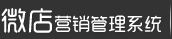
<style>
.page{position:relative;width:172px;height:39px;background:#333333}
.page>*{position:absolute;margin:0}
.t1{font:18px "RTWSYueRoudGoDemo-Regular";color:#ffffff}
.t2{font:27px "RTWSYueRoudGoDemo-Regular";color:#ffffff}
</style>
<div class="page">
<p class="t1" style="left:1px;top:8px;width:161px;height:25px"><span class="t2">微店</span>营销管理系统</p>
</div>
